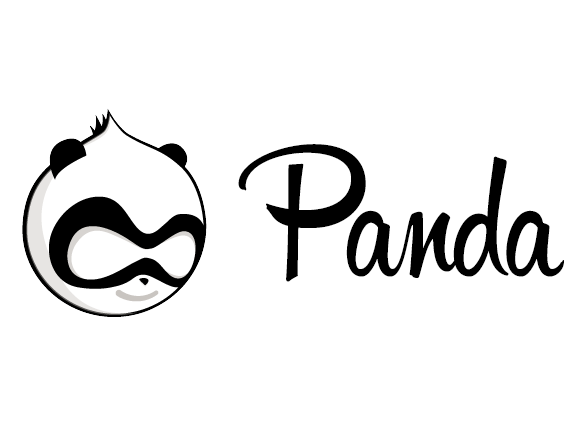
<style>
.page{position:relative;width:588px;height:438px;background:#ffffff}
.page>*{position:absolute;margin:0}
.t1{font:150px "HipsterScriptPro";color:#000000}
</style>
<div class="page">
<p class="t1" style="left:238px;top:144px;width:326px;height:138px">Panda</p>
</div>
